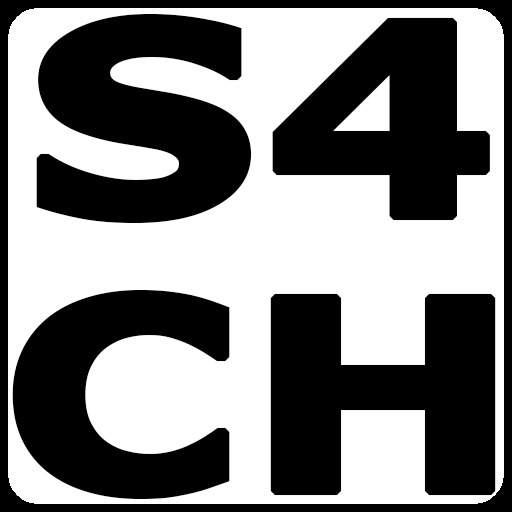
<style>
.page{position:relative;width:512px;height:512px;background:#ffffff}
.page>*{position:absolute;margin:0}
.t1{font:265.8px/276px "Verdana-Bold";letter-spacing:-0.016em;color:#000000;font-weight:bold;scale:1.25 1}
</style>
<div class="page">
<p class="t1" style="left:12px;top:13px;width:484px;height:487px;text-align:center">S4<br>CH</p>
</div>
